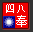
<style>
.page{position:relative;width:33px;height:32px;background:#f20000}
.page>*{position:absolute;margin:0}
.t1{font:10.4px "SimSun";color:#ffffff}
.t2{font:11.7px "SimSun";color:#ffffff}
</style>
<div class="page">
<p class="t1" style="left:6px;top:4px;width:19px;height:9px">四八</p>
<p class="t2" style="left:16px;top:15px;width:11px;height:12px">奉</p>
</div>
